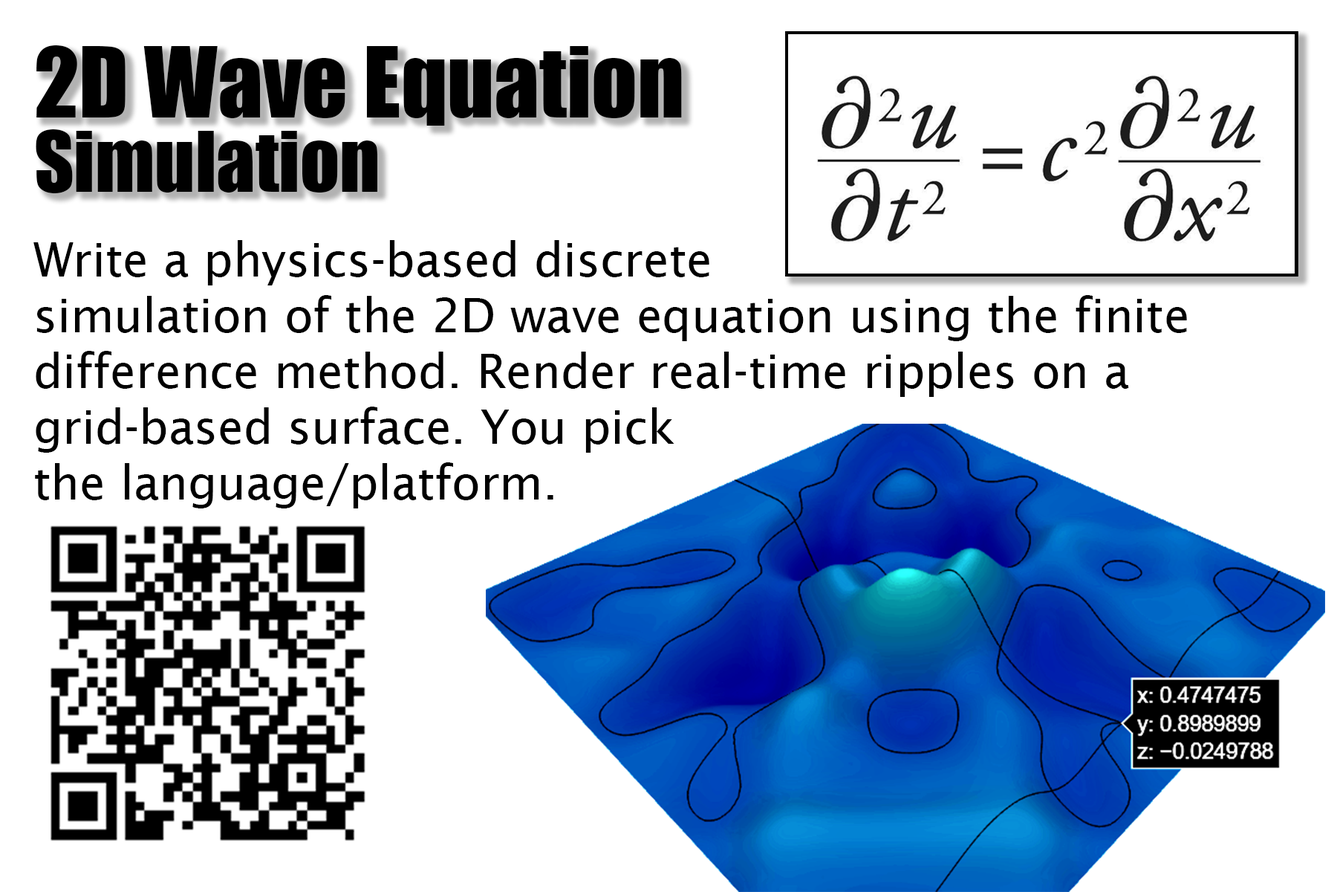
<style>
.page{position:relative;width:1337px;height:892px;background:#ffffff}
.page>*{position:absolute;margin:0}
.t1{font:89.8px "Impact";color:#000000}
.t2{font:77.4px/74.3px "Impact";color:#000000}
.t3{font:46.4px "LucidaSans";color:#000000}
</style>
<div class="page">
<p class="t1" style="left:36px;top:45px;width:646px;height:148px">2D Wave Equation<br><span class="t2">Simulation</span></p>
<p class="t3" style="left:33px;top:240px;width:1154px;height:268px">Write a physics-based discrete <br>simulation of the 2D wave equation using the finite <br>difference method. Render real-time ripples on a <br>grid-based surface. You pick <br>the language/platform.</p>
</div>
